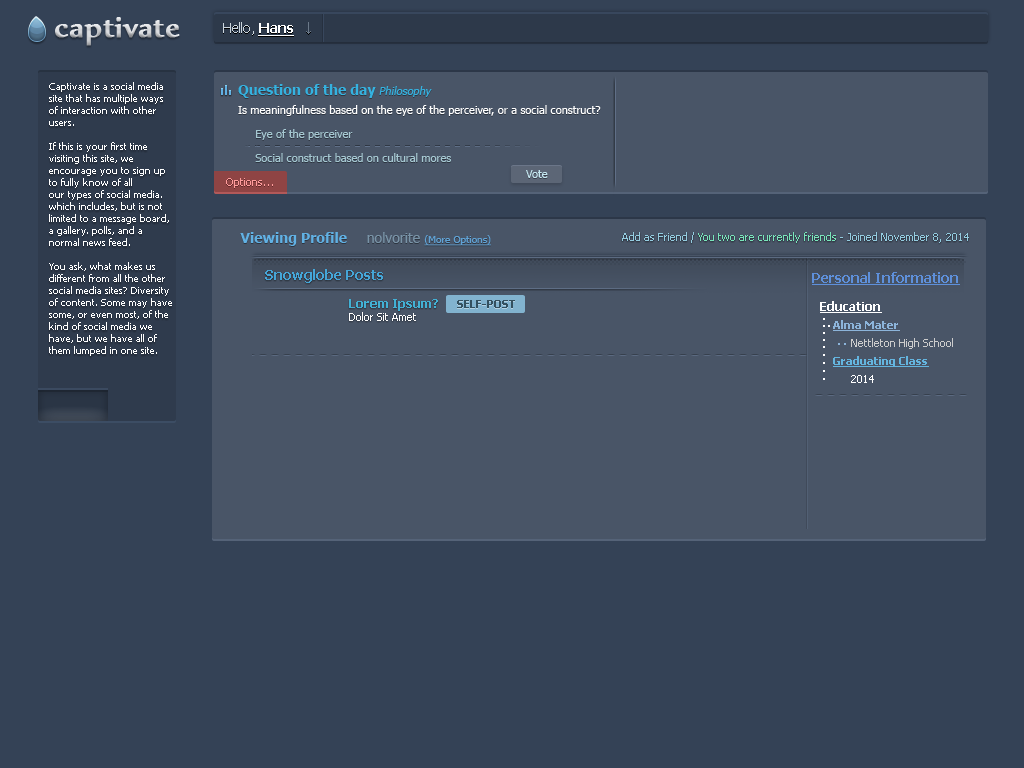
<style>
.page{position:relative;width:1024px;height:768px;background:#344256}
.page>*{position:absolute;margin:0}
.t1{font:14px "Tahoma";color:#ccd6de}
.t2{font:14px "Tahoma-Bold";color:#ffffff;text-decoration:underline}
.t3{font:10px "Tahoma";color:#ffffff}
.t4{font:11px/19px "Tahoma";color:#ffffff}
.t5{font:14px/18px "Tahoma-Bold";color:#35b2e0}
.t6{font:11px/18px "Tahoma";color:#35b2e0;font-style:italic}
.t7{font:11px/24px "Tahoma";color:#a6c8d2}
.t8{font:11px/16px "Tahoma";color:#c5e7f1}
.t9{font:11px "Tahoma";color:#ff9c9c}
.t10{font:14px "Tahoma-Bold";color:#61b1e4}
.t11{font:14px "Tahoma";color:#7993a7}
.t12{font:10px "Tahoma";color:#60a2d5;text-decoration:underline}
.t13{font:11px "Tahoma";color:#79e5bb}
.t14{font:11px "Tahoma";color:#94cce0}
.t15{font:14px/18px "Tahoma-Bold";color:#45a6d8}
.t16{font:13px/28px "Tahoma-Bold";color:#42b1d5}
.t17{font:11px/13px "Tahoma";color:#ffffff}
.t18{font:11px "Tahoma-Bold";color:#34505f}
</style>
<div class="page">
<p class="t1" style="left:223px;top:22px;width:71px;height:14px">Hello, <span class="t2">Hans</span></p>
<p class="t3" style="left:49px;top:82px;width:123px;height:274px">Captivate is a social media<br>site that has multiple ways<br>of interaction with other<br>users.<br><br>If this is your first time<br>visiting this site, we<br>encourage you to sign up<br>to fully know of all<br>our types of social media.<br>which includes, but is not<br>limited to a message board,<br>a gallery. polls, and a <br>normal news feed.<br><br>You ask, what makes us<br>different from all the other<br>social media sites? Diversity<br>of content. Some may have<br>some, or even most, of the<br>kind of social media we<br>have, but we have all of<br>them lumped in one site.</p>
<p class="t4" style="left:238px;top:84px;width:363px;height:94px"><span class="t5">Question of the day </span><span class="t6">Philosophy<br></span>Is meaningfulness based on the eye of the perceiver, or a social construct?<br>   <span class="t7">  Eye of the perceiver<br>     Social construct based on cultural mores<br>        </span><span class="t8">Vote</span></p>
<p class="t9" style="left:226px;top:178px;width:47px;height:10px">Options...</p>
<p class="t10" style="left:240px;top:232px;width:251px;height:14px">Viewing Profile     <span class="t11">nolvorite </span><span class="t12">(More Options)</span></p>
<p class="t13" style="left:622px;top:232px;width:347px;height:11px"><span class="t14">     Add as Friend / </span>You two are currently friends<span class="t14"> - Joined November 8, 2014</span></p>
<p class="t15" style="left:265px;top:269px;width:173px;height:52px">Snowglobe Posts<br><span class="t16">                     Lorem Ipsum?<br>                     </span><span class="t17">Dolor Sit Amet</span></p>
<p class="t18" style="left:457px;top:300px;width:58px;height:8px">SELF-POST</p>
</div>
